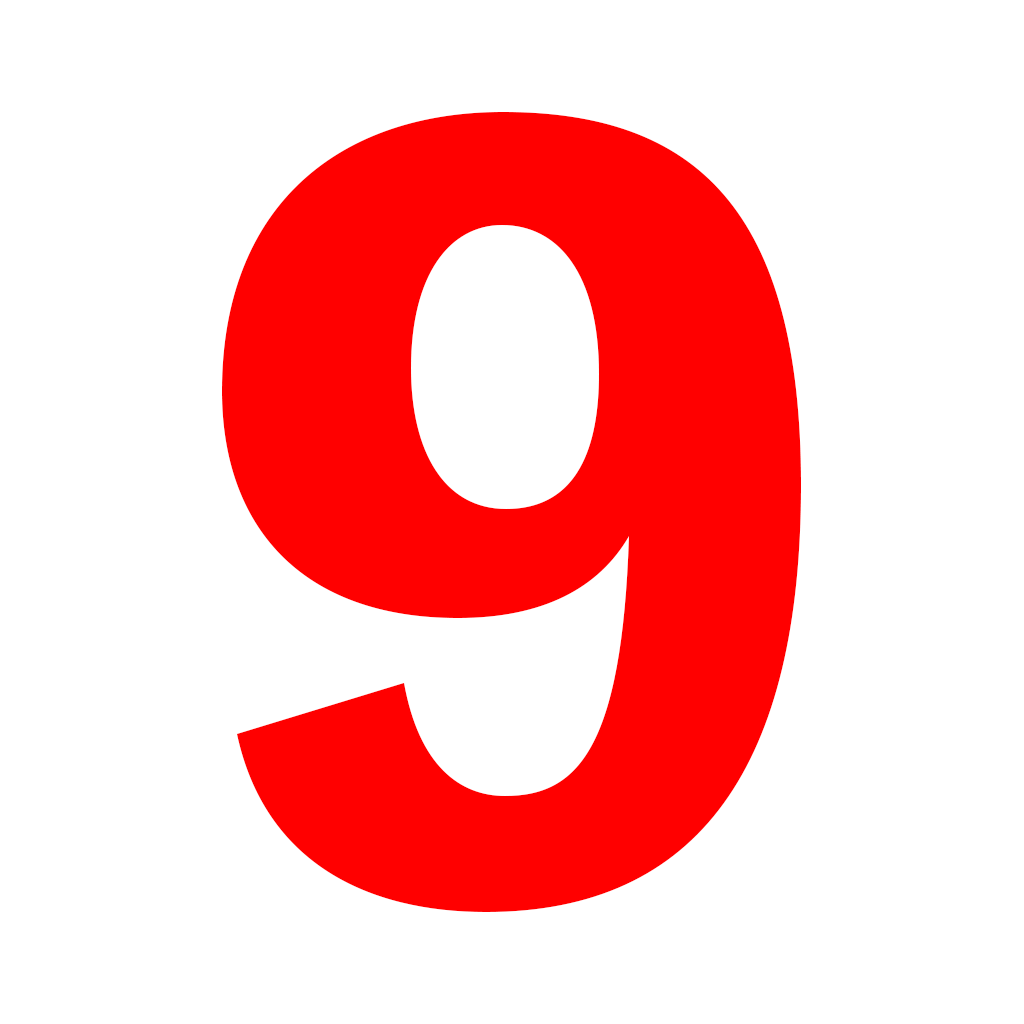
<style>
.page{position:relative;width:1024px;height:1024px;background:#ffffff}
.page>*{position:absolute;margin:0}
.t1{font:1000px "ToppanBunkyuMidashiGothicStdN-ExtraBold";color:#ff0000}
</style>
<div class="page">
<p class="t1" style="left:222px;top:112px;width:579px;height:800px">9</p>
</div>
